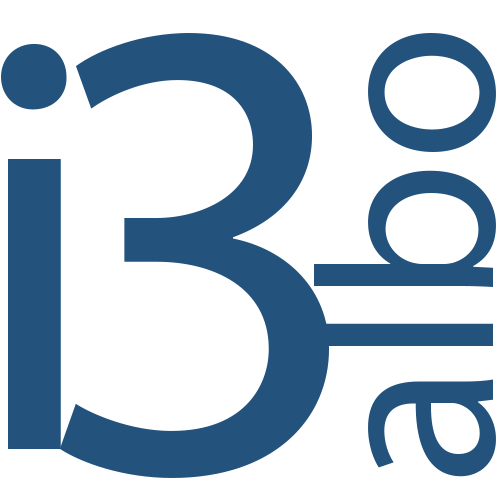
<style>
.page{position:relative;width:500px;height:500px;background:#ffffff}
.page>*{position:absolute;margin:0}
.t1{font:663px "MyriadPro-Regular";color:#23527c}
.t2{font:251.5px "MyriadPro-Regular";color:#23527c}
.t3{font:600px "MyriadPro-Regular";color:#23527c}
</style>
<div class="page">
<p class="t1" style="left:59px;top:33px;width:270px;height:445px">3</p>
<p class="t2" style="left:314px;top:33px;width:182px;height:444px;rotate:-90deg">albo</p>
<p class="t3" style="left:1px;top:43px;width:66px;height:406px">i</p>
</div>
